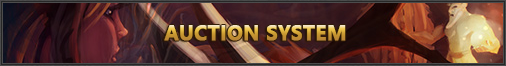
<style>
.page{position:relative;width:506px;height:66px}
.page>*{position:absolute;margin:0}
.t1{font:19.6px "MicrosoftYaHei-Bold";font-weight:bold}
</style>
<div class="page">
<p class="t1" style="left:164px;top:25px;width:182px;height:16px">AUCTION SYSTEM</p>
</div>
